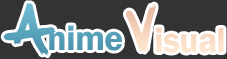
<style>
.page{position:relative;width:227px;height:59px;background:#333333}
.page>*{position:absolute;margin:0}
.t1{font:36px "FranklinGothic-Demi";letter-spacing:-0.025em;color:#569fb8}
.t2{font:60px "YourMumRang";letter-spacing:-0.025em;color:#569fb8}
.t3{font:36px "FranklinGothic-Demi";letter-spacing:-0.025em;color:#f9dcc5}
.t4{font:60px "YourMumRang";letter-spacing:-0.025em;color:#f9dcc5}
</style>
<div class="page">
<p class="t1" style="left:3px;top:3px;width:119px;height:53px"><span class="t2">A</span>nime</p>
<p class="t3" style="left:126px;top:4px;width:98px;height:49px"><span class="t4">V</span>isual</p>
</div>
